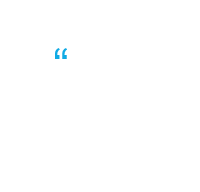
<style>
.page{position:relative;width:200px;height:192px;background:#ffffff}
.page>*{position:absolute;margin:0}
.t1{font:48px "ArialMT";color:#10aae4}
</style>
<div class="page">
<p class="t1" style="left:55px;top:48px;width:12px;height:11px">“</p>
</div>
